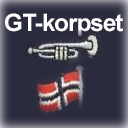
<style>
.page{position:relative;width:128px;height:128px;background:#2b2b3e}
.page>*{position:absolute;margin:0}
.t1{font:24px "Arial-BoldMT";letter-spacing:-0.033em;color:#ffffff}
</style>
<div class="page">
<p class="t1" style="left:5px;top:13px;width:118px;height:23px">GT-korpset</p>
</div>
